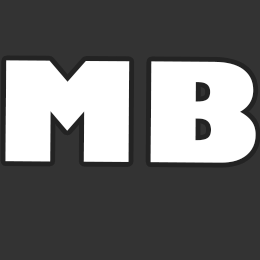
<style>
.page{position:relative;width:260px;height:260px;background:#333333}
.page>*{position:absolute;margin:0}
.t1{font:135px "GillSans-UltraBold";letter-spacing:0.025em;color:#ffffff}
</style>
<div class="page">
<p class="t1" style="left:5px;top:60px;width:251px;height:103px">MB</p>
</div>
